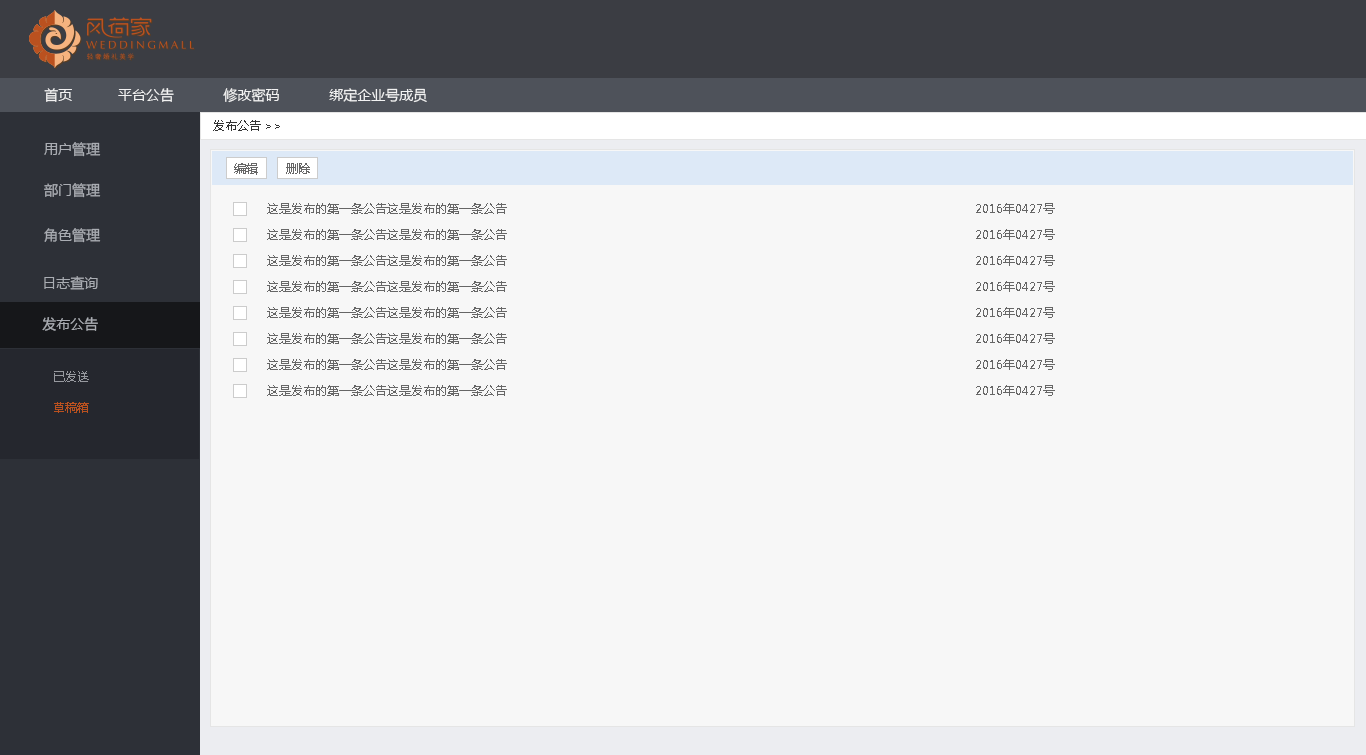
<style>
.page{position:relative;width:1366px;height:755px;background:#f7f7f7}
.page>*{position:absolute;margin:0}
.t1{font:14px "MicrosoftYaHei";color:#f2f2f2}
.t2{font:12px "MicrosoftYaHei";color:#333333}
.t3{font:14px/41px "MicrosoftYaHei";color:#aaadb3}
.t4{font:12px "MicrosoftYaHei";color:#666666}
.t5{font:14px "MicrosoftYaHei";color:#aaadb3}
.t6{font:12px/31px "MicrosoftYaHei";color:#97999f}
.t7{font:12px/31px "MicrosoftYaHei";color:#ba511f}
</style>
<div class="page">
<p class="t1" style="left:44px;top:88px;width:383px;height:15px">首页           平台公告            修改密码            绑定企业号成员</p>
<p class="t2" style="left:213px;top:120px;width:67px;height:11px">发布公告&gt;&gt;</p>
<p class="t3" style="left:44px;top:142px;width:57px;height:56px">用户管理<br>部门管理</p>
<p class="t4" style="left:234px;top:163px;width:76px;height:12px">编辑       删除</p>
<p class="t4" style="left:267px;top:203px;width:788px;height:11px">这是发布的第一条公告这是发布的第一条公告                                                                                                                     2016年0427号</p>
<p class="t5" style="left:44px;top:228px;width:57px;height:15px">角色管理</p>
<p class="t4" style="left:267px;top:229px;width:788px;height:11px">这是发布的第一条公告这是发布的第一条公告                                                                                                                     2016年0427号</p>
<p class="t4" style="left:267px;top:255px;width:788px;height:11px">这是发布的第一条公告这是发布的第一条公告                                                                                                                     2016年0427号</p>
<p class="t3" style="left:42px;top:276px;width:56px;height:55px">日志查询<br>发布公告</p>
<p class="t4" style="left:267px;top:281px;width:788px;height:11px">这是发布的第一条公告这是发布的第一条公告                                                                                                                     2016年0427号</p>
<p class="t4" style="left:267px;top:307px;width:788px;height:11px">这是发布的第一条公告这是发布的第一条公告                                                                                                                     2016年0427号</p>
<p class="t4" style="left:267px;top:333px;width:788px;height:11px">这是发布的第一条公告这是发布的第一条公告                                                                                                                     2016年0427号</p>
<p class="t4" style="left:267px;top:359px;width:788px;height:11px">这是发布的第一条公告这是发布的第一条公告                                                                                                                     2016年0427号</p>
<p class="t6" style="left:54px;top:371px;width:35px;height:42px">已发送<br><span class="t7">草稿箱</span></p>
<p class="t4" style="left:267px;top:385px;width:788px;height:11px">这是发布的第一条公告这是发布的第一条公告                                                                                                                     2016年0427号</p>
</div>
